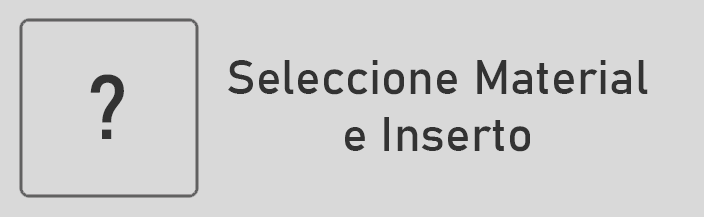
<style>
.page{position:relative;width:704px;height:217px;background:#d9d9d9}
.page>*{position:absolute;margin:0}
.t1{font:48px "Bahnschrift";color:#333333}
.t2{font:30px "Bahnschrift";color:#333333}
.t3{font:90px "Bahnschrift";color:#333333}
</style>
<div class="page">
<p class="t1" style="left:228px;top:60px;width:420px;height:92px;text-align:center"><span class="t2"><br><br></span>Seleccione Material<br>e Inserto</p>
<p class="t3" style="left:90px;top:74px;width:34px;height:65px">?</p>
</div>
